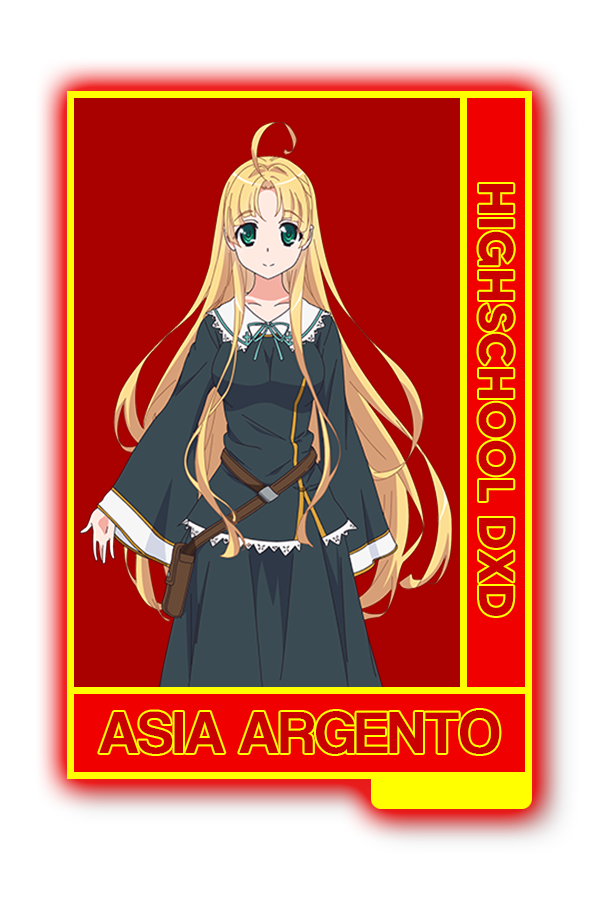
<style>
.page{position:relative;width:600px;height:900px;background:#ffffff}
.page>*{position:absolute;margin:0}
.t1{font:48.8px "MADETOMMY-Bold";color:#ca0000}
.t2{font:61.8px "CoolveticaRg-Regular";color:#ca0000}
</style>
<div class="page">
<p class="t1" style="left:478px;top:184px;width:36px;height:432px;rotate:90deg">HIGHSCHOOL DXD</p>
<p class="t2" style="left:99px;top:710px;width:401px;height:44px">ASIA ARGENTO</p>
</div>
